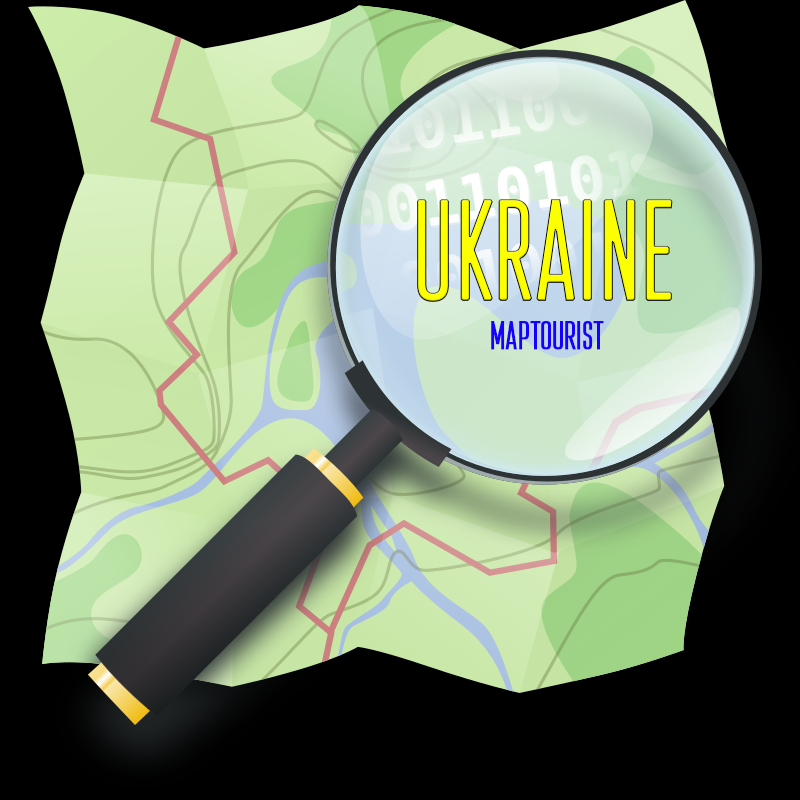
<style>
.page{position:relative;width:800px;height:800px;background:#000000}
.page>*{position:absolute;margin:0}
.t1{font:140px "Attentica4F-UltraLight";color:#fcff00;font-weight:bold}
.t2{font:40px "Attentica4F-UltraLight";color:#1800ff;font-weight:bold}
</style>
<div class="page">
<p class="t1" style="left:417px;top:199px;width:256px;height:103px">UKRAINE</p>
<p class="t2" style="left:491px;top:321px;width:113px;height:29px">MapTourist</p>
</div>
